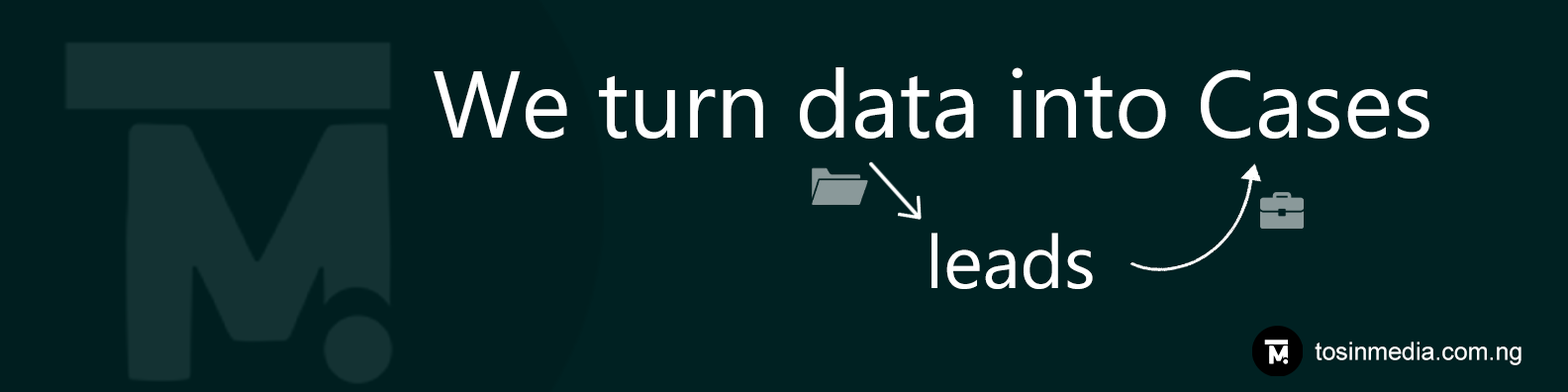
<style>
.page{position:relative;width:1568px;height:392px;background:#002122}
.page>*{position:absolute;margin:0}
.t1{font:94.9px "Ebrima";color:#ffffff}
.t2{font:74.2px "Ebrima";color:#ffffff}
.t3{font:24.7px "ArialMT";color:#ffffff}
</style>
<div class="page">
<p class="t1" style="left:434px;top:67px;width:995px;height:72px">We turn data into Cases</p>
<p class="t2" style="left:931px;top:233px;width:162px;height:56px">leads</p>
<p class="t3" style="left:1315px;top:342px;width:206px;height:23px">tosinmedia.com.ng</p>
</div>
